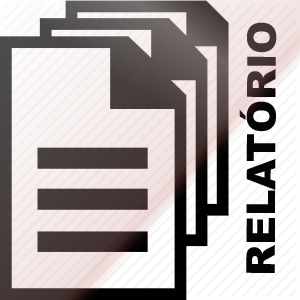
<style>
.page{position:relative;width:300px;height:300px}
.page>*{position:absolute;margin:0}
.t1{font:39.6px "Arial-Black";color:#040404}
</style>
<div class="page">
<p class="t1" style="left:239px;top:22px;width:38px;height:251px;rotate:-90deg">RELATÓRIO</p>
</div>
